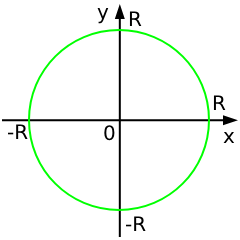
<style>
.page{position:relative;width:240px;height:240px;background:#ffffff}
.page>*{position:absolute;margin:0}
.t1{font:20px "DejaVuSans";color:#000000}
</style>
<div class="page">
<p class="t1" style="left:97px;top:8px;width:12px;height:16px">y</p>
<p class="t1" style="left:129px;top:11px;width:13px;height:15px">R</p>
<p class="t1" style="left:213px;top:95px;width:13px;height:15px">R</p>
<p class="t1" style="left:7px;top:124px;width:21px;height:15px">-R</p>
<p class="t1" style="left:104px;top:125px;width:11px;height:16px">0</p>
<p class="t1" style="left:223px;top:132px;width:12px;height:11px">x</p>
<p class="t1" style="left:125px;top:216px;width:21px;height:15px">-R</p>
</div>
